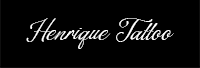
<style>
.page{position:relative;width:200px;height:68px;background:#000000}
.page>*{position:absolute;margin:0}
.t1{font:31.8px "Florilane-Cardillac";color:#ffffff}
</style>
<div class="page">
<p class="t1" style="left:26px;top:18px;width:148px;height:31px">Henrique Tattoo</p>
</div>
